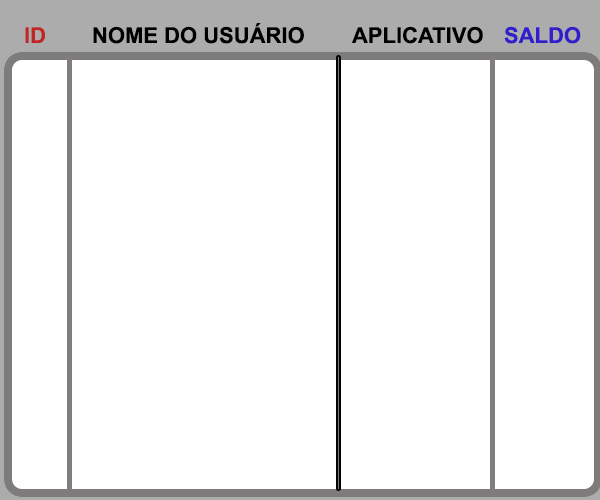
<style>
.page{position:relative;width:600px;height:500px;background:#ffffff}
.page>*{position:absolute;margin:0}
.t1{font:22px "Arial-BoldMT";color:#c02626}
.t2{font:22px "Arial-BoldMT";color:#000000}
.t3{font:22px "Arial-BoldMT";color:#321dcb}
</style>
<div class="page">
<p class="t1" style="left:25px;top:27px;width:20px;height:16px">ID</p>
<p class="t2" style="left:93px;top:23px;width:211px;height:21px">NOME DO USUÁRIO</p>
<p class="t2" style="left:352px;top:26px;width:131px;height:18px">APLICATIVO</p>
<p class="t3" style="left:504px;top:26px;width:77px;height:18px">SALDO</p>
</div>
